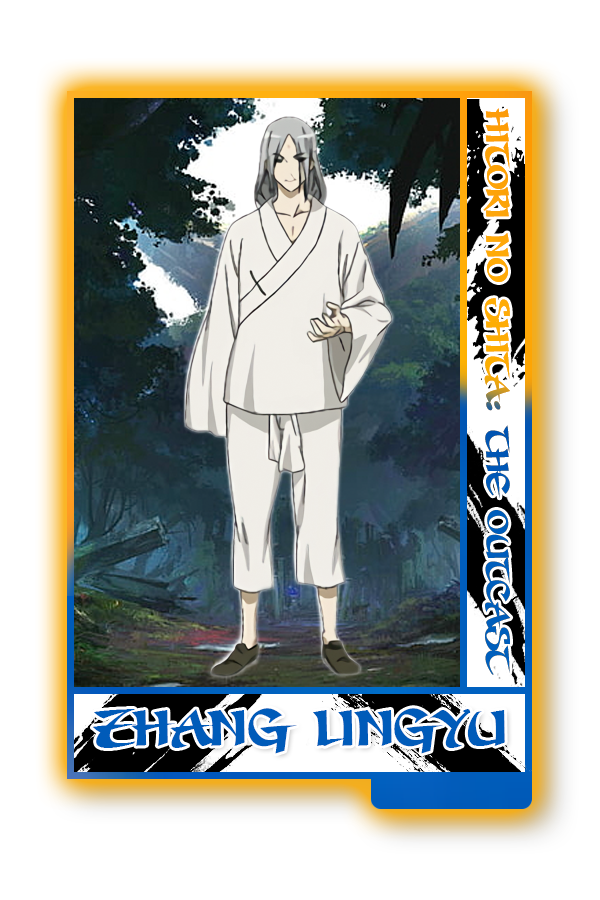
<style>
.page{position:relative;width:600px;height:900px;background:#ffffff}
.page>*{position:absolute;margin:0}
.t1{font:36.7px "SevenSwordsmenBB"}
.t2{font:58.4px "SevenSwordsmenBB";color:#005bb9}
</style>
<div class="page">
<p class="t1" style="left:483px;top:108px;width:28px;height:567px;rotate:90deg">HITORI NO SHITA: THE OUTCAST</p>
<p class="t2" style="left:92px;top:708px;width:413px;height:46px">Zhang Lingyu</p>
</div>
